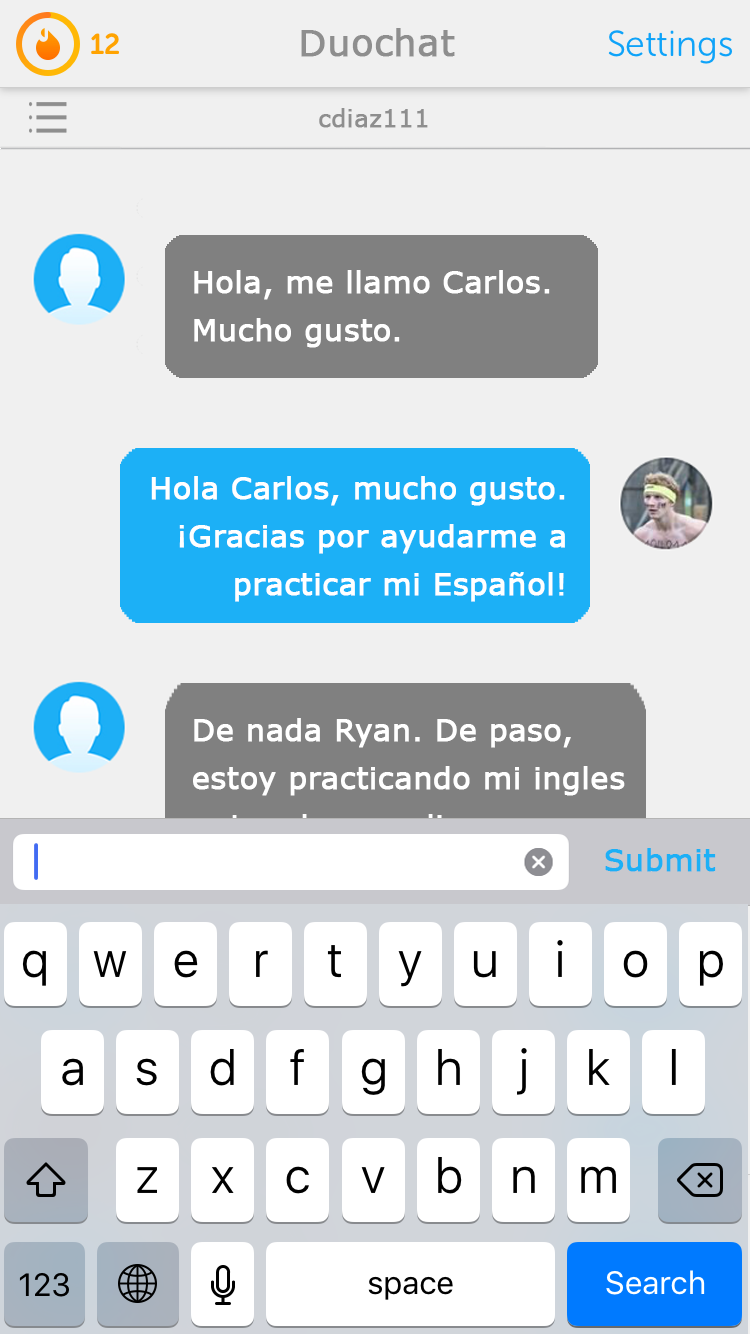
<style>
.page{position:relative;width:750px;height:1334px;background:#f0f0f0}
.page>*{position:absolute;margin:0}
.t1{font:36px "MSReferenceSansSerif";color:#8e8e8e;font-weight:bold}
.t2{font:24px "MSReferenceSansSerif";color:#8e8e8e;font-weight:bold}
.t3{font:30px/48px "MSReferenceSansSerif";color:#ffffff;font-weight:bold}
.t4{font:30px "MSReferenceSansSerif";color:#1cb0f6;font-weight:bold}
</style>
<div class="page">
<p class="t1" style="left:301px;top:28px;width:154px;height:29px">Duochat</p>
<p class="t2" style="left:319px;top:108px;width:109px;height:20px">cdiaz111</p>
<p class="t3" style="left:194px;top:270px;width:356px;height:78px">Hola, me llamo Carlos.<br>Mucho gusto.</p>
<p class="t3" style="left:151px;top:476px;width:414px;height:126px;text-align:right">Hola Carlos, mucho gusto.<br>¡Gracias por ayudarme a<br>practicar mi Español!</p>
<p class="t3" style="left:193px;top:718px;width:432px;height:222px">De nada Ryan. De paso,<br>estoy practicando mi ingles<br>antes de yo aplico a<br>universidad. ¿Podrías<br>ayudarme?</p>
<p class="t4" style="left:605px;top:848px;width:111px;height:24px">Submit</p>
</div>
